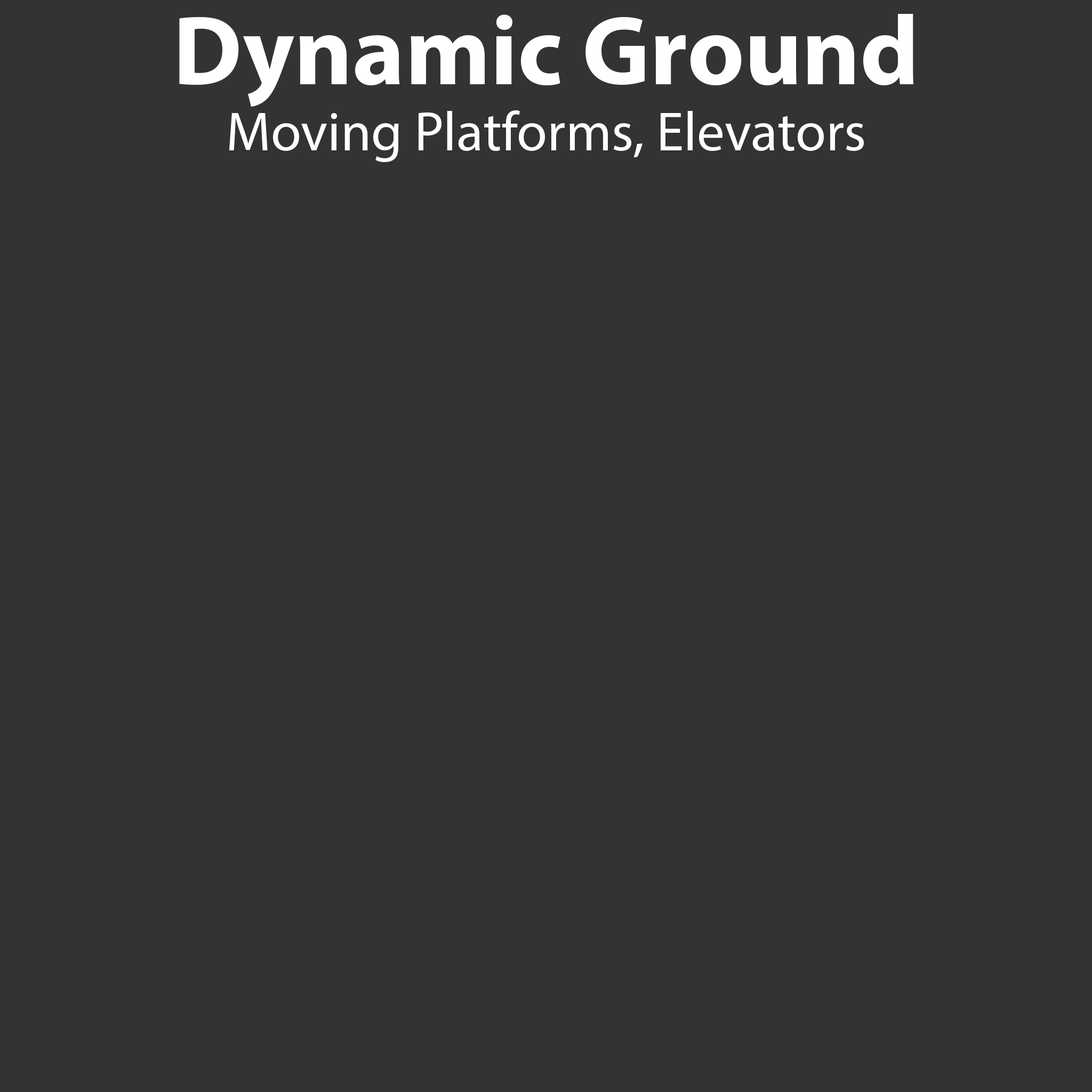
<style>
.page{position:relative;width:1092px;height:1092px;background:#333333}
.page>*{position:absolute;margin:0}
.t1{font:55.5px "MyriadPro-Regular";color:#ffffff}
.t2{font:99.2px "MyriadPro-Bold";color:#ffffff}
</style>
<div class="page">
<p class="t1" style="left:179px;top:14px;width:734px;height:148px;text-align:center"><span class="t2">Dynamic Ground<br></span>Moving Platforms, Elevators</p>
</div>
